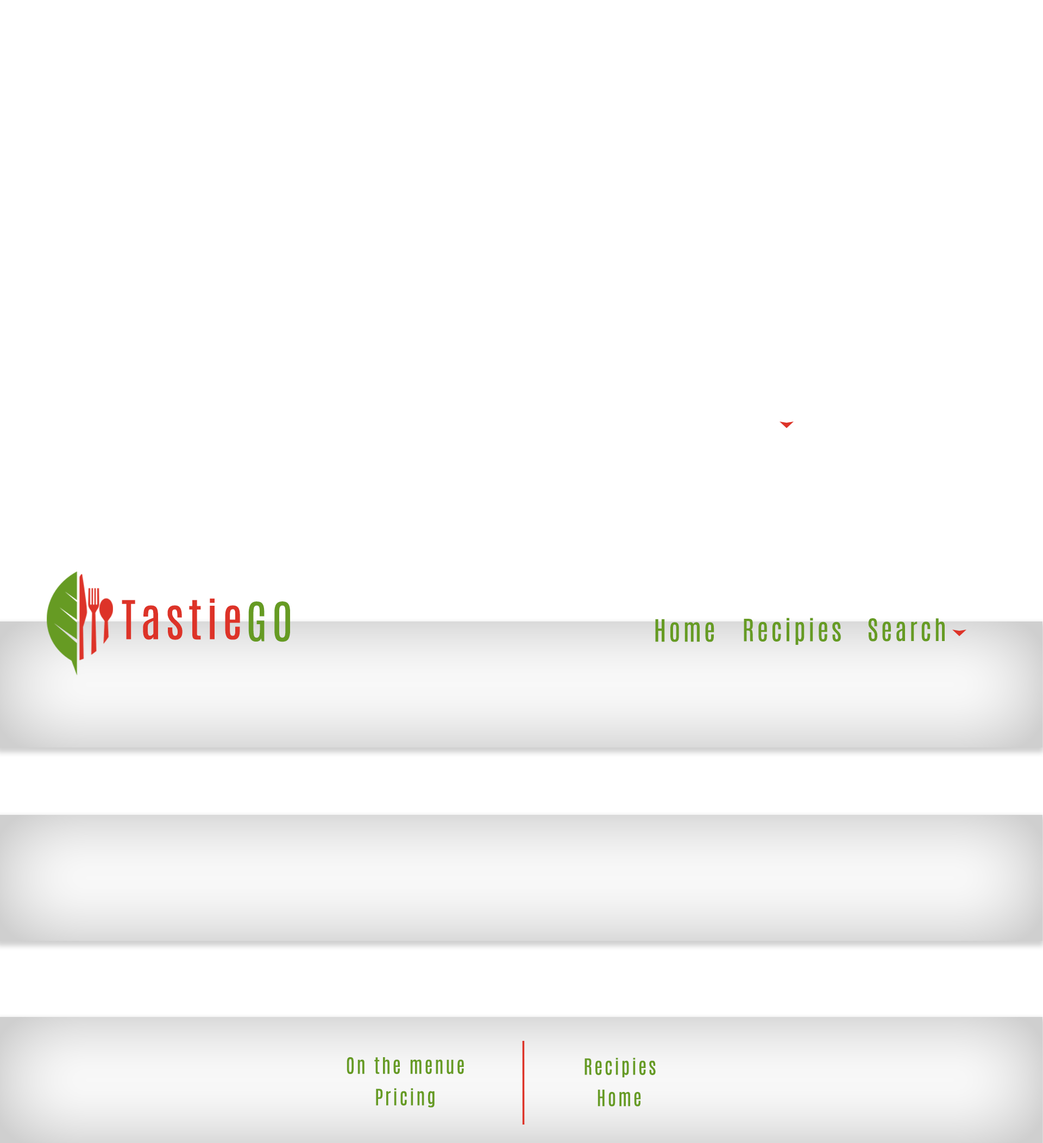
<style>
.page{position:relative;width:1043px;height:1143px;background:#ffffff}
.page>*{position:absolute;margin:0}
.t1{font:45.6px "Antonio-Regular";letter-spacing:0.1em;color:#dd3328}
.t2{font:45.6px "Antonio-Regular";letter-spacing:0.1em;color:#669b23}
.t3{font:26.1px "Antonio-Regular";letter-spacing:0.1em;color:#669b23}
.t4{font:19px "Antonio-Regular";letter-spacing:0.1em;color:#669b23}
</style>
<div class="page">
<p class="t1" style="left:122px;top:598px;width:118px;height:42px">Tastie</p>
<p class="t2" style="left:248px;top:601px;width:42px;height:41px">GO</p>
<p class="t3" style="left:744px;top:618px;width:97px;height:27px">Recipies</p>
<p class="t3" style="left:655px;top:619px;width:59px;height:23px">Home</p>
<p class="t3" style="left:868px;top:618px;width:77px;height:24px">Search</p>
<p class="t4" style="left:347px;top:1057px;width:117px;height:17px">On the menue</p>
<p class="t4" style="left:585px;top:1058px;width:71px;height:20px">Recipies</p>
<p class="t4" style="left:376px;top:1088px;width:59px;height:20px">Pricing</p>
<p class="t4" style="left:598px;top:1089px;width:43px;height:18px">Home</p>
</div>
